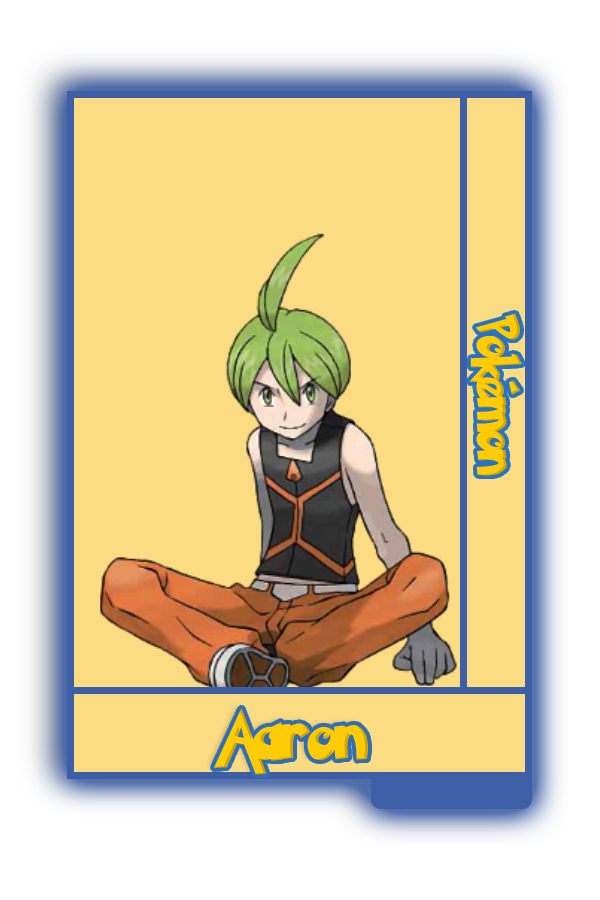
<style>
.page{position:relative;width:600px;height:900px;background:#fbdc83}
.page>*{position:absolute;margin:0}
.t1{font:48.8px "PokemonSolidNormal";color:#ffcb05;scale:0.8 1}
.t2{font:56.6px "PokemonSolidNormal";color:#ffcb05;scale:0.92 1}
</style>
<div class="page">
<p class="t1" style="left:469px;top:313px;width:54px;height:163px;rotate:90deg">Pokémon</p>
<p class="t2" style="left:213px;top:708px;width:156px;height:67px">Aaron</p>
</div>
